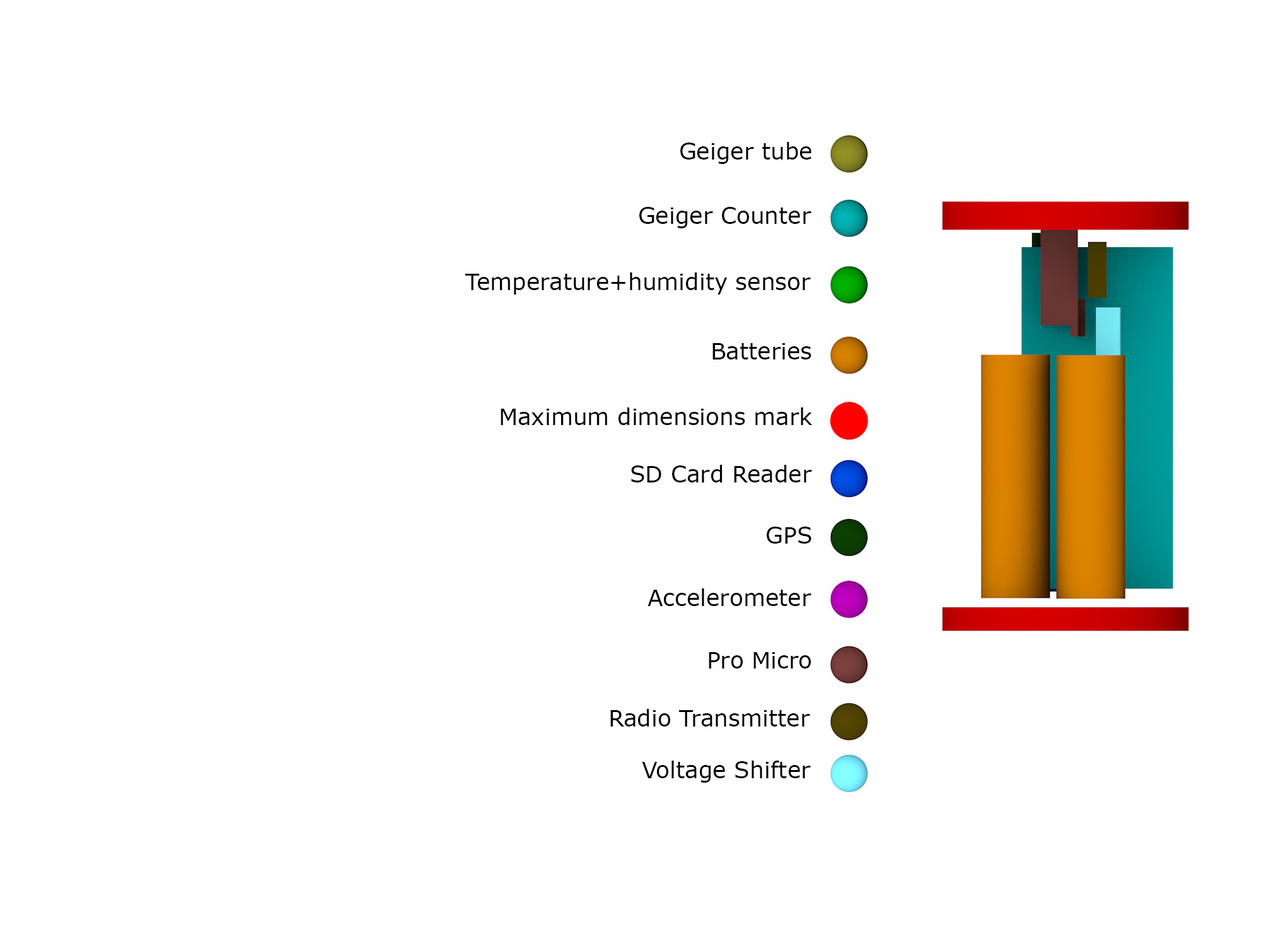
<style>
.page{position:relative;width:1261px;height:946px;background:#ffffff}
.page>*{position:absolute;margin:0}
.t1{font:22.7px "Verdana";color:#000000}
</style>
<div class="page">
<p class="t1" style="left:680px;top:142px;width:131px;height:22px">Geiger tube</p>
<p class="t1" style="left:639px;top:207px;width:172px;height:21px">Geiger Counter</p>
<p class="t1" style="left:465px;top:272px;width:346px;height:22px">Temperature+humidity sensor</p>
<p class="t1" style="left:712px;top:343px;width:99px;height:16px">Batteries</p>
<p class="t1" style="left:501px;top:407px;width:311px;height:18px">Maximum dimensions mark</p>
<p class="t1" style="left:631px;top:465px;width:181px;height:17px">SD Card Reader</p>
<p class="t1" style="left:767px;top:526px;width:44px;height:17px">GPS</p>
<p class="t1" style="left:647px;top:588px;width:164px;height:18px">Accelerometer</p>
<p class="t1" style="left:709px;top:652px;width:102px;height:16px">Pro Micro</p>
<p class="t1" style="left:610px;top:709px;width:200px;height:17px">Radio Transmitter</p>
<p class="t1" style="left:642px;top:760px;width:169px;height:22px">Voltage Shifter</p>
</div>
